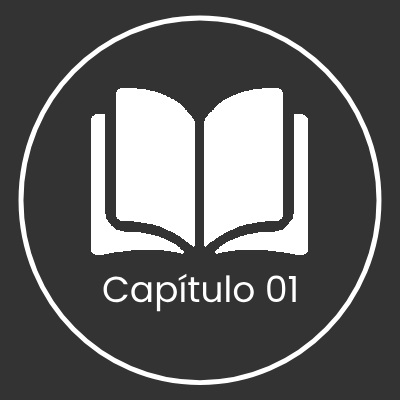
<style>
.page{position:relative;width:400px;height:400px;background:#333333}
.page>*{position:absolute;margin:0}
.t1{font:36px "Poppins-Regular";color:#ffffff}
</style>
<div class="page">
<p class="t1" style="left:103px;top:273px;width:193px;height:39px">Capítulo 01</p>
</div>
